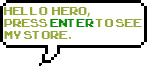
<style>
.page{position:relative;width:147px;height:66px;background:#ffffff}
.page>*{position:absolute;margin:0}
.t1{font:16px "ArcadeClassic";color:#97a732}
.t2{font:16px "MyriadPro-Regular";color:#97a732}
.t3{font:16px "ArcadeClassic";color:#068f02}
.t4{font:16px "MyriadPro-Regular"}
</style>
<div class="page">
<p class="t1" style="left:4px;top:7px;width:83px;height:8px">hello  hero</p>
<p class="t2" style="left:87px;top:12px;width:3px;height:5px">,</p>
<p class="t1" style="left:4px;top:19px;width:138px;height:8px">press <span class="t3">enter</span> to see</p>
<p class="t1" style="left:4px;top:31px;width:64px;height:8px">my store</p>
<p class="t4" style="left:68px;top:36px;width:3px;height:3px">.</p>
</div>
